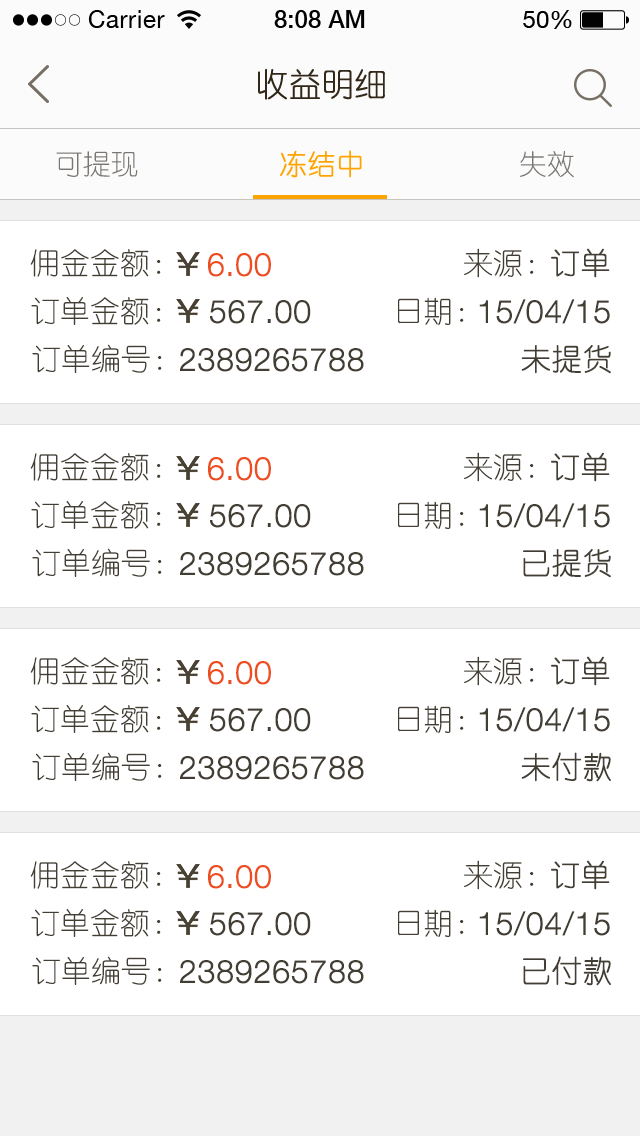
<style>
.page{position:relative;width:640px;height:1136px;background:#ffffff}
.page>*{position:absolute;margin:0}
.t1{font:32px "YouYuan";color:#312819;text-transform:uppercase;font-weight:bold}
.t2{font:28px "YouYuan";color:#ffa300;text-transform:uppercase;font-weight:bold}
.t3{font:28px "YouYuan";color:#7a7772;text-transform:uppercase}
.t4{font:30px "YouYuan";color:#433e34;text-transform:uppercase}
.t5{font:32px "HelveticaNeueLTPro-Lt";color:#ed4e1f;text-transform:uppercase;font-weight:bold}
.t6{font:30px "YouYuan";color:#433e34;text-transform:uppercase;font-weight:bold}
.t7{font:32px "HelveticaNeueLTPro-Lt";color:#433e34;text-transform:uppercase;font-weight:bold}
</style>
<div class="page">
<p class="t1" style="left:258px;top:69px;width:127px;height:31px">收益明细</p>
<p class="t2" style="left:280px;top:150px;width:82px;height:28px">冻结中</p>
<p class="t3" style="left:56px;top:151px;width:82px;height:26px">可提现</p>
<p class="t3" style="left:520px;top:151px;width:54px;height:27px">失效</p>
<p class="t4" style="left:30px;top:249px;width:131px;height:28px">佣金金额：</p>
<p class="t5" style="left:208px;top:253px;width:63px;height:24px">6.00</p>
<p class="t4" style="left:464px;top:248px;width:70px;height:30px">来源：</p>
<p class="t6" style="left:551px;top:248px;width:59px;height:30px">订单</p>
<p class="t4" style="left:31px;top:297px;width:130px;height:28px">订单金额：</p>
<p class="t7" style="left:210px;top:300px;width:101px;height:24px">567.00</p>
<p class="t4" style="left:398px;top:297px;width:66px;height:28px">日期：</p>
<p class="t7" style="left:479px;top:299px;width:131px;height:25px">15/04/15</p>
<p class="t4" style="left:32px;top:344px;width:130px;height:29px">订单编号：</p>
<p class="t7" style="left:180px;top:348px;width:184px;height:24px">2389265788</p>
<p class="t6" style="left:521px;top:345px;width:90px;height:29px">未提货</p>
<p class="t4" style="left:30px;top:453px;width:131px;height:28px">佣金金额：</p>
<p class="t5" style="left:208px;top:457px;width:63px;height:24px">6.00</p>
<p class="t4" style="left:464px;top:452px;width:70px;height:30px">来源：</p>
<p class="t6" style="left:551px;top:452px;width:59px;height:30px">订单</p>
<p class="t4" style="left:31px;top:501px;width:130px;height:28px">订单金额：</p>
<p class="t7" style="left:210px;top:504px;width:101px;height:24px">567.00</p>
<p class="t4" style="left:398px;top:501px;width:66px;height:28px">日期：</p>
<p class="t7" style="left:479px;top:503px;width:131px;height:25px">15/04/15</p>
<p class="t4" style="left:32px;top:548px;width:130px;height:29px">订单编号：</p>
<p class="t7" style="left:180px;top:552px;width:184px;height:24px">2389265788</p>
<p class="t6" style="left:523px;top:549px;width:88px;height:29px">已提货</p>
<p class="t4" style="left:30px;top:657px;width:131px;height:28px">佣金金额：</p>
<p class="t5" style="left:208px;top:661px;width:63px;height:24px">6.00</p>
<p class="t4" style="left:464px;top:656px;width:70px;height:30px">来源：</p>
<p class="t6" style="left:551px;top:656px;width:59px;height:30px">订单</p>
<p class="t4" style="left:31px;top:705px;width:130px;height:28px">订单金额：</p>
<p class="t7" style="left:210px;top:708px;width:101px;height:24px">567.00</p>
<p class="t4" style="left:398px;top:705px;width:66px;height:28px">日期：</p>
<p class="t7" style="left:479px;top:707px;width:131px;height:25px">15/04/15</p>
<p class="t4" style="left:32px;top:752px;width:130px;height:29px">订单编号：</p>
<p class="t7" style="left:180px;top:756px;width:184px;height:24px">2389265788</p>
<p class="t6" style="left:521px;top:752px;width:90px;height:30px">未付款</p>
<p class="t4" style="left:30px;top:861px;width:131px;height:28px">佣金金额：</p>
<p class="t5" style="left:208px;top:865px;width:63px;height:24px">6.00</p>
<p class="t4" style="left:464px;top:860px;width:70px;height:30px">来源：</p>
<p class="t6" style="left:551px;top:860px;width:59px;height:30px">订单</p>
<p class="t4" style="left:31px;top:909px;width:130px;height:28px">订单金额：</p>
<p class="t7" style="left:210px;top:912px;width:101px;height:24px">567.00</p>
<p class="t4" style="left:398px;top:909px;width:66px;height:28px">日期：</p>
<p class="t7" style="left:479px;top:911px;width:131px;height:25px">15/04/15</p>
<p class="t4" style="left:32px;top:956px;width:130px;height:29px">订单编号：</p>
<p class="t7" style="left:180px;top:960px;width:184px;height:24px">2389265788</p>
<p class="t6" style="left:523px;top:956px;width:88px;height:30px">已付款</p>
</div>
